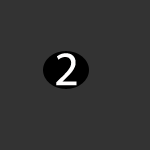
<style>
.page{position:relative;width:150px;height:150px;background:#333333}
.page>*{position:absolute;margin:0}
.t1{font:48px "MyriadPro-Regular";color:#fffefe}
</style>
<div class="page">
<p class="t1" style="left:56px;top:53px;width:21px;height:33px">2</p>
</div>
